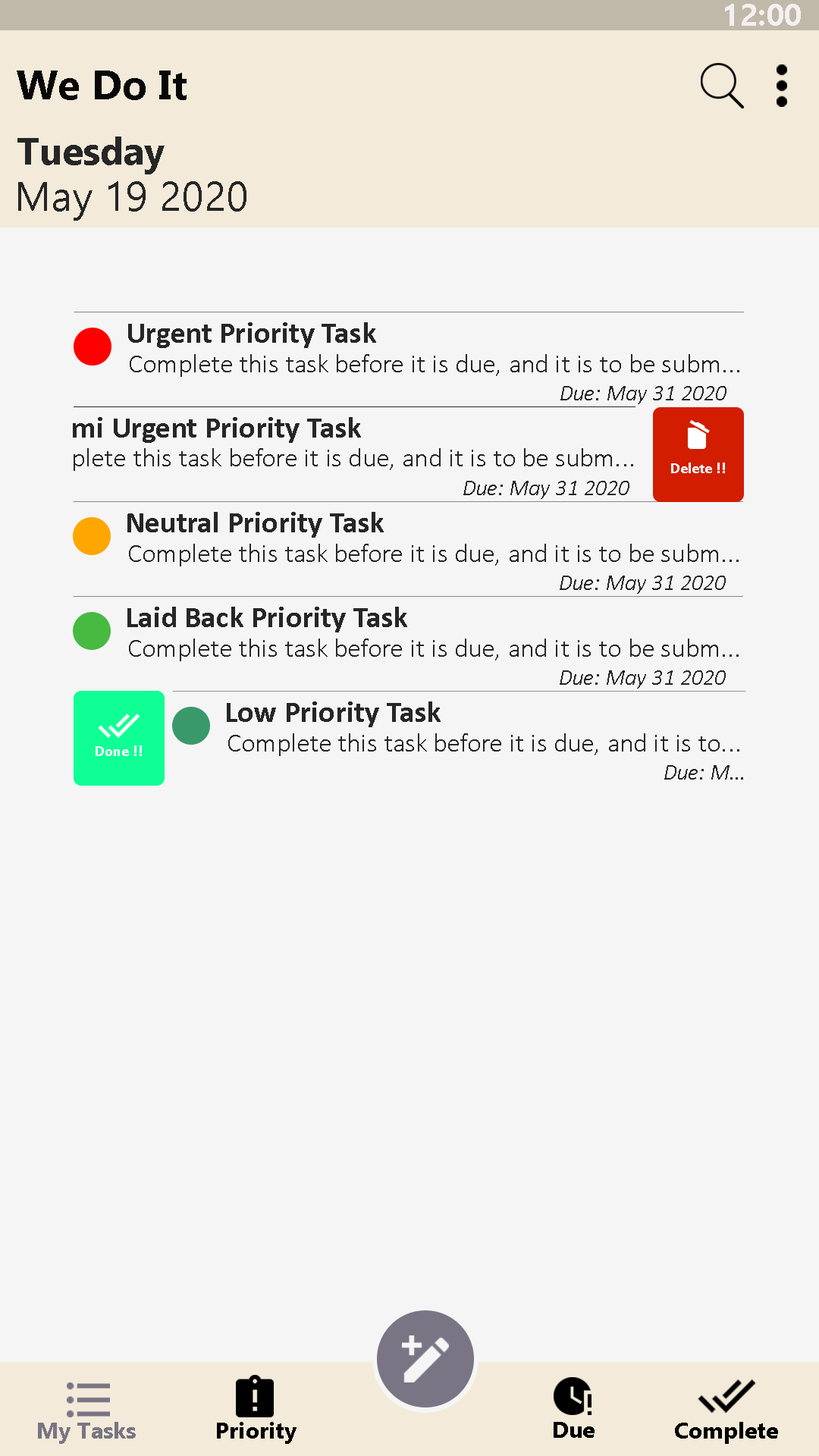
<style>
.page{position:relative;width:819px;height:1456px;background:#f5f5f6}
.page>*{position:absolute;margin:0}
.t1{font:30.8px "Ebrima-Bold";letter-spacing:0.005em;color:#f4f0f0}
.t2{font:40.9px "Ebrima-Bold";letter-spacing:0.005em;color:#070707}
.t3{font:37.9px "Ebrima-Bold";letter-spacing:0.005em;color:#262626}
.t4{font:40.9px "Ebrima";letter-spacing:0.005em;color:#262626}
.t5{font:30.3px "Calibri-Bold";letter-spacing:0.005em;color:#262626}
.t6{font:26.5px "Calibri-Light";letter-spacing:0.005em;color:#262626}
.t7{font:22.7px "Calibri-LightItalic";letter-spacing:0.005em;color:#262626}
.t8{font:15.2px "Calibri-Bold";letter-spacing:0.005em;color:#ffffff}
.t9{font:22.7px "Ebrima-Bold";letter-spacing:0.005em;color:#797584}
.t10{font:22.7px "Ebrima-Bold";letter-spacing:0.005em;color:#000000}
</style>
<div class="page">
<p class="t1" style="left:725px;top:4px;width:76px;height:22px">12:00</p>
<p class="t2" style="left:17px;top:71px;width:170px;height:29px">We Do It</p>
<p class="t3" style="left:17px;top:136px;width:148px;height:38px">Tuesday</p>
<p class="t4" style="left:18px;top:181px;width:228px;height:40px">May 19 2020</p>
<p class="t5" style="left:128px;top:322px;width:248px;height:26px">Urgent Priority Task</p>
<p class="t6" style="left:130px;top:354px;width:609px;height:23px">Complete this task before it is due, and it is to be subm...</p>
<p class="t7" style="left:560px;top:386px;width:166px;height:18px">Due: May 31 2020</p>
<p class="t5" style="left:73px;top:417px;width:288px;height:26px">mi Urgent Priority Task</p>
<p class="t6" style="left:74px;top:448px;width:559px;height:23px">plete this task before it is due, and it is to be subm...</p>
<p class="t8" style="left:671px;top:463px;width:54px;height:10px">Delete !!</p>
<p class="t7" style="left:463px;top:481px;width:166px;height:18px">Due: May 31 2020</p>
<p class="t5" style="left:127px;top:512px;width:257px;height:26px">Neutral Priority Task</p>
<p class="t6" style="left:129px;top:544px;width:610px;height:22px">Complete this task before it is due, and it is to be subm...</p>
<p class="t7" style="left:560px;top:576px;width:166px;height:18px">Due: May 31 2020</p>
<p class="t5" style="left:127px;top:607px;width:280px;height:25px">Laid Back Priority Task</p>
<p class="t6" style="left:129px;top:639px;width:610px;height:22px">Complete this task before it is due, and it is to be subm...</p>
<p class="t7" style="left:560px;top:670px;width:166px;height:19px">Due: May 31 2020</p>
<p class="t5" style="left:227px;top:701px;width:214px;height:26px">Low Priority Task</p>
<p class="t6" style="left:228px;top:733px;width:511px;height:23px">Complete this task before it is due, and it is to...</p>
<p class="t8" style="left:96px;top:745px;width:46px;height:11px">Done !!</p>
<p class="t7" style="left:664px;top:765px;width:79px;height:15px">Due: M...</p>
<p class="t9" style="left:38px;top:1422px;width:98px;height:22px">My Tasks</p>
<p class="t10" style="left:217px;top:1422px;width:80px;height:22px">Priority</p>
<p class="t10" style="left:554px;top:1422px;width:41px;height:16px">Due</p>
<p class="t10" style="left:675px;top:1422px;width:103px;height:22px">Complete</p>
</div>
